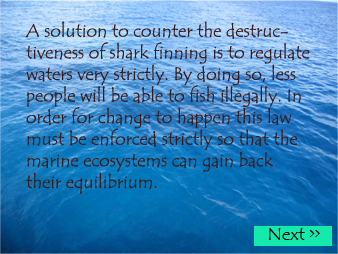
<style>
.page{position:relative;width:338px;height:254px}
.page>*{position:absolute;margin:0}
.t1{font:18px "TempusSansITC";color:#3d1b1b}
</style>
<div class="page">
<p class="t1" style="left:25px;top:21px;width:285px;height:173px">A solution to counter the destructiveness of shark finning is to regulate waters very strictly. By doing so, less people will be able to fish illegally. In order for change to happen this law must be enforced strictly so that the marine ecosystems can gain back their equilibrium.</p>
</div>
